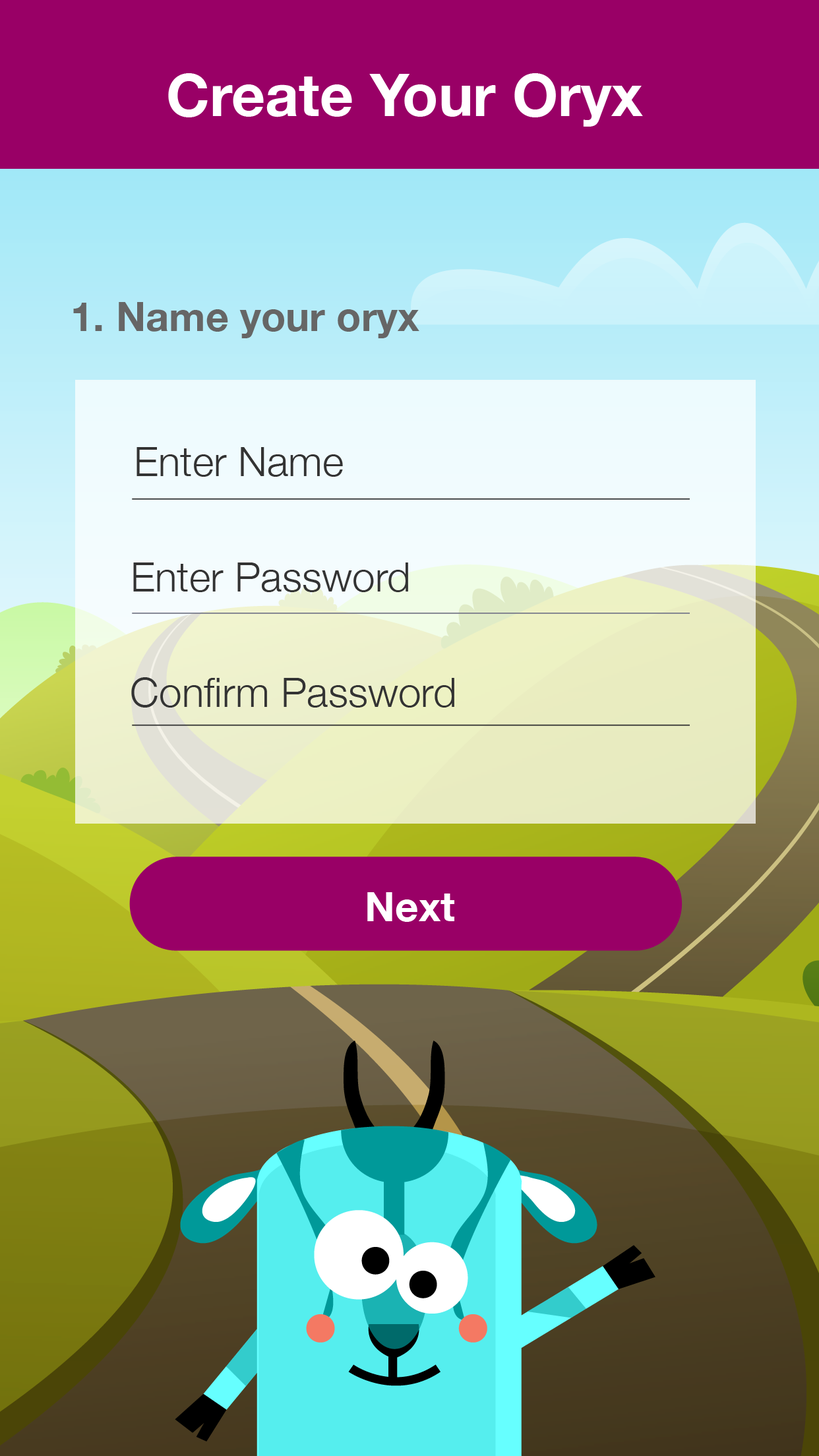
<style>
.page{position:relative;width:819px;height:1456px}
.page>*{position:absolute;margin:0}
.t1{font:58.8px "HelveticaNeue-Bold";color:#ffffff}
.t2{font:40.4px "HelveticaNeue-Bold";color:#666666}
.t3{font:41.1px "HelveticaNeue-Light";color:#292b2d}
.t4{font:41.1px "HelveticaNeue-Bold";color:#ffffff}
</style>
<div class="page">
<p class="t1" style="left:168px;top:73px;width:475px;height:54px">Create Your Oryx</p>
<p class="t2" style="left:73px;top:302px;width:346px;height:36px">1. Name your oryx</p>
<p class="t3" style="left:136px;top:447px;width:207px;height:30px">Enter Name</p>
<p class="t3" style="left:133px;top:562px;width:275px;height:30px">Enter Password</p>
<p class="t3" style="left:131px;top:677px;width:323px;height:31px">Confirm Password</p>
<p class="t4" style="left:367px;top:892px;width:87px;height:30px">Next</p>
</div>
